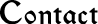
<style>
.page{position:relative;width:98px;height:24px;background:#ffffff}
.page>*{position:absolute;margin:0}
.t1{font:24px "Kelmscott-Regular";letter-spacing:0.05em;color:#000000}
.t2{font:30px "Kelmscott-Regular";letter-spacing:0.05em;color:#000000}
</style>
<div class="page">
<p class="t1" style="left:0px;top:0px;width:98px;height:24px"><span class="t2">C</span>ontact</p>
</div>
